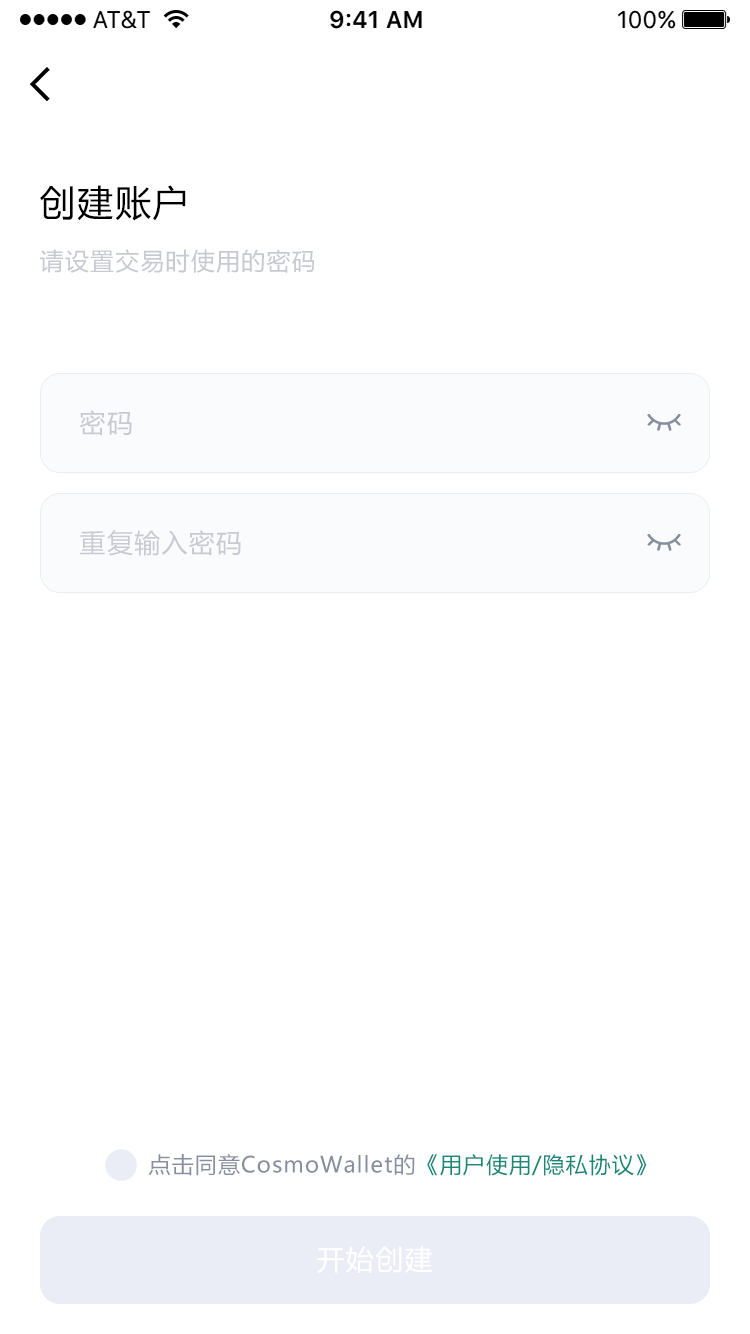
<style>
.page{position:relative;width:750px;height:1334px;background:#ffffff}
.page>*{position:absolute;margin:0}
.t1{font:36px "MicrosoftYaHei";letter-spacing:0.05em;color:#000000}
.t2{font:24px "MicrosoftYaHei";letter-spacing:0.05em;color:#c8cad2}
.t3{font:26px "MicrosoftYaHei";letter-spacing:0.05em;color:#c8cad2}
.t4{font:22px "MicrosoftYaHei";letter-spacing:0.05em;color:#878e9f}
.t5{font:22px "MicrosoftYaHei";letter-spacing:0.05em;color:#158878}
.t6{font:28px "MicrosoftYaHei";letter-spacing:0.05em;color:#ffffff}
</style>
<div class="page">
<p class="t1" style="left:40px;top:185px;width:146px;height:36px">创建账户</p>
<p class="t2" style="left:40px;top:249px;width:274px;height:24px">请设置交易时使用的密码</p>
<p class="t3" style="left:79px;top:410px;width:53px;height:26px">密码</p>
<p class="t3" style="left:80px;top:530px;width:161px;height:26px">重复输入密码</p>
<p class="t4" style="left:148px;top:1154px;width:499px;height:22px">点击同意CosmoWallet的<span class="t5">《用户使用/隐私协议》</span></p>
<p class="t6" style="left:317px;top:1246px;width:116px;height:27px">开始创建</p>
</div>
